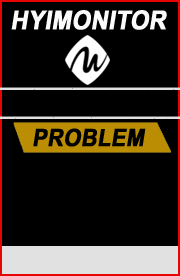
<style>
.page{position:relative;width:180px;height:276px;background:#000000}
.page>*{position:absolute;margin:0}
.t1{font:26px "Arial-BoldMT";color:#fbfbfb;font-weight:bold;font-style:italic;scale:0.9 1}
.t2{font:24px "Arial-BoldMT";color:#010101;font-weight:bold;font-style:italic;scale:0.9 1}
</style>
<div class="page">
<p class="t1" style="left:11px;top:10px;width:156px;height:20px">HYIMONITOR</p>
<p class="t2" style="left:33px;top:128px;width:113px;height:19px">PROBLEM</p>
</div>
